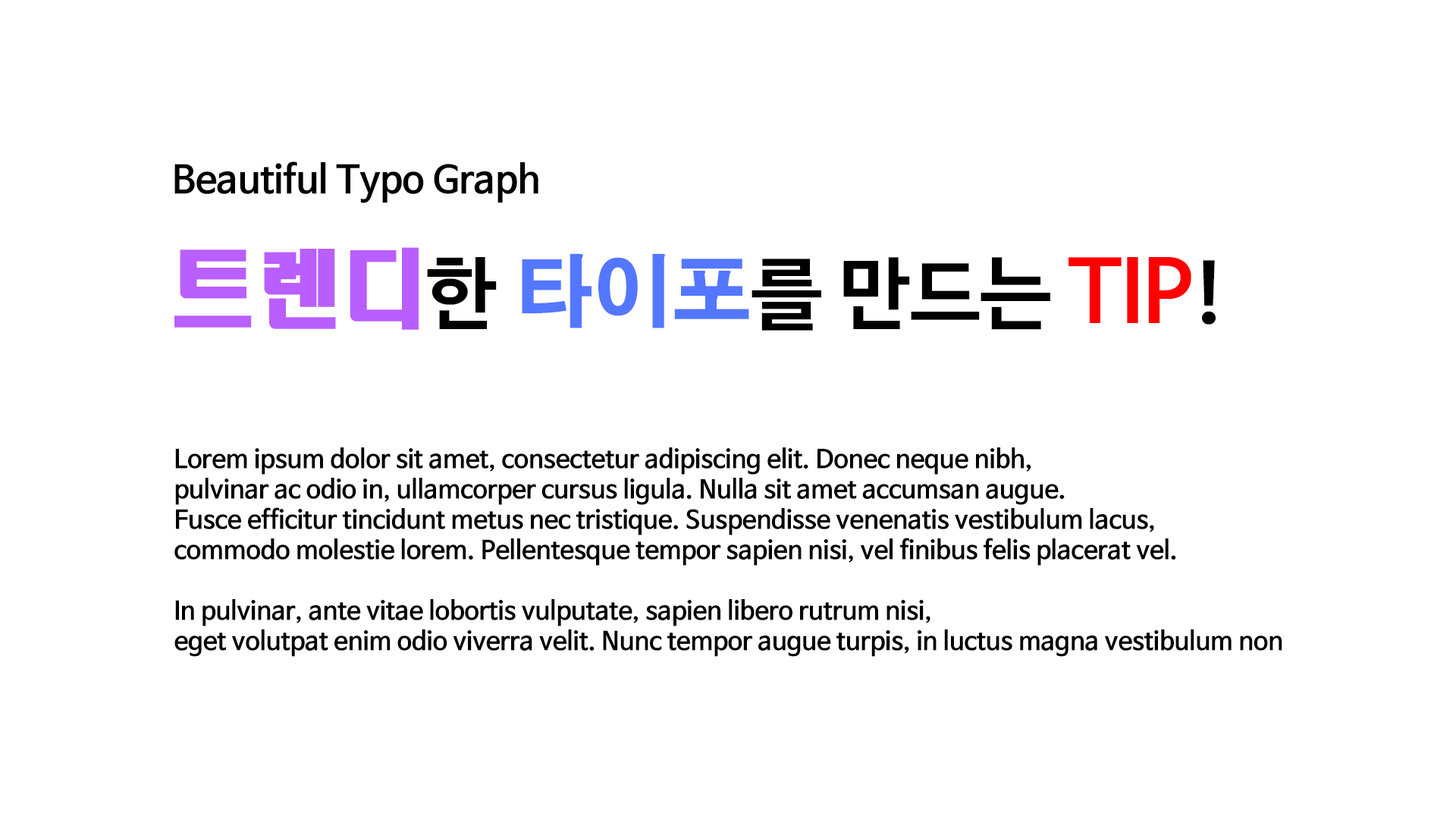
<style>
.page{position:relative;width:1456px;height:819px;background:#ffffff}
.page>*{position:absolute;margin:0}
.t1{font:37.9px "NanumBarunGothicBold";color:#000000}
.t2{font:79px "NanumBarunGothicBold";color:#000000}
.t3{font:85.3px "HeadlineR-HM";color:#b95eff}
.t4{font:79px "H2gtrE";color:#5377ff}
.t5{font:85.3px "NanumBarunGothicBold";color:#ff0000}
.t6{font:25.3px "NanumBarunGothicBold";color:#000000}
</style>
<div class="page">
<p class="t1" style="left:174px;top:162px;width:364px;height:41px">Beautiful Typo Graph</p>
<p class="t2" style="left:174px;top:247px;width:1042px;height:84px"><span class="t3">트렌디</span>한 <span class="t4">타이포</span>를 만드는 <span class="t5">TIP</span>!</p>
<p class="t6" style="left:174px;top:447px;width:1108px;height:210px">Lorem ipsum dolor sit amet, consectetur adipiscing elit. Donec neque nibh, <br>pulvinar ac odio in, ullamcorper cursus ligula. Nulla sit amet accumsan augue. <br>Fusce efficitur tincidunt metus nec tristique. Suspendisse venenatis vestibulum lacus, <br>commodo molestie lorem. Pellentesque tempor sapien nisi, vel finibus felis placerat vel.<br> <br>In pulvinar, ante vitae lobortis vulputate, sapien libero rutrum nisi, <br>eget volutpat enim odio viverra velit. Nunc tempor augue turpis, in luctus magna vestibulum non</p>
</div>
